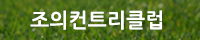
<style>
.page{position:relative;width:200px;height:40px}
.page>*{position:absolute;margin:0}
.t1{font:20px "NanumGothicBold";letter-spacing:0.02em;color:#ffffff}
</style>
<div class="page">
<p class="t1" style="left:30px;top:10px;width:132px;height:20px">조의컨트리클럽</p>
</div>
